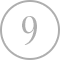
<style>
.page{position:relative;width:60px;height:60px;background:#ffffff}
.page>*{position:absolute;margin:0}
.t1{font:48px "NuevaStd-Cond";color:#aeaeae}
</style>
<div class="page">
<p class="t1" style="left:22px;top:16px;width:15px;height:29px">9</p>
</div>
